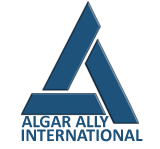
<style>
.page{position:relative;width:160px;height:149px;background:#ffffff}
.page>*{position:absolute;margin:0}
.t1{font:17.7px "Calibri-Bold";color:#1e527b}
.t2{font:18px "Calibri-Bold";color:#1e527b}
</style>
<div class="page">
<p class="t1" style="left:21px;top:115px;width:88px;height:13px">ALGAR ALLY</p>
<p class="t2" style="left:21px;top:129px;width:122px;height:13px">INTERNATIONAL</p>
</div>
